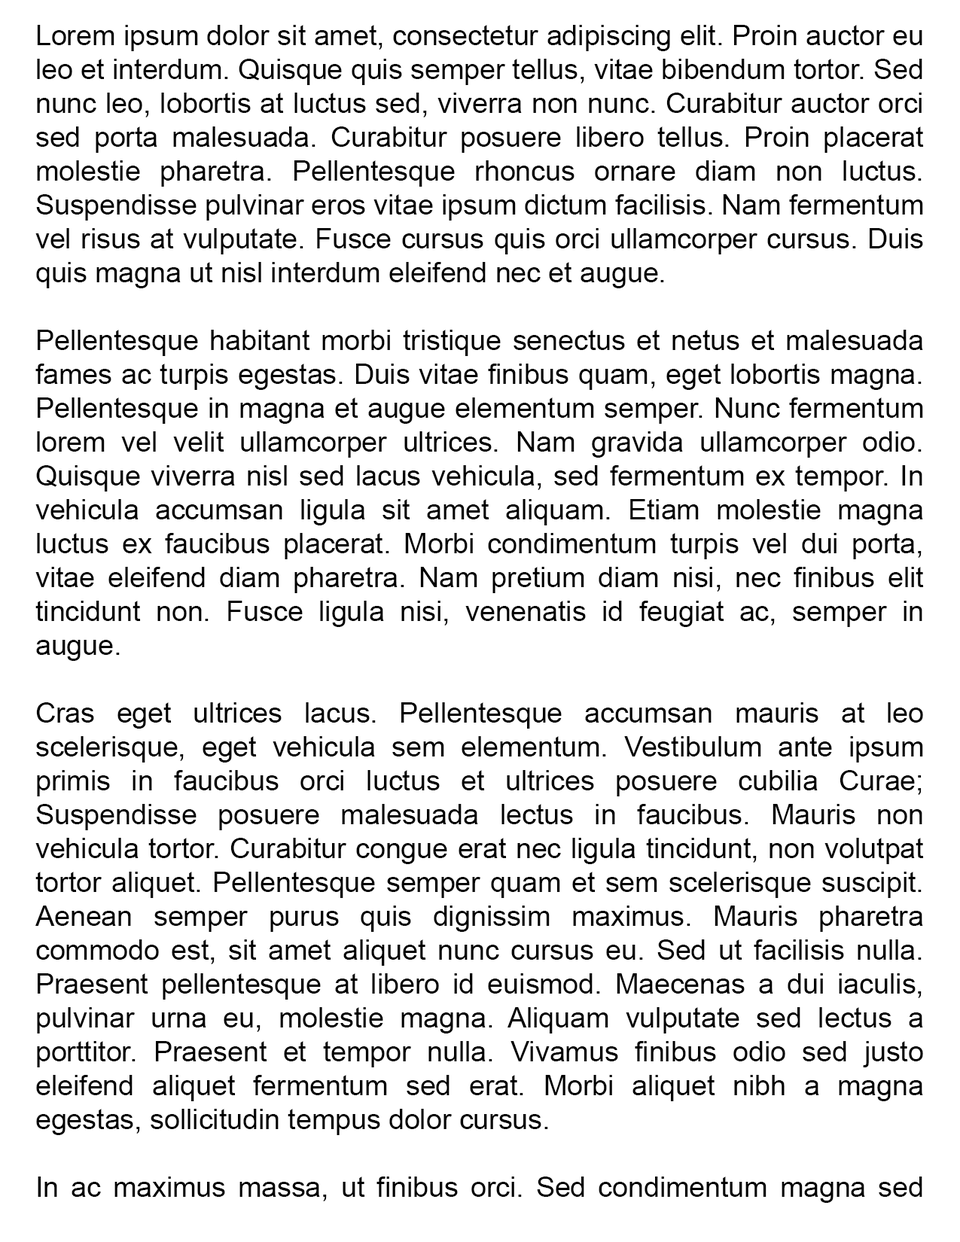
<style>
.page{position:relative;width:960px;height:1242px;background:#ffffff}
.page>*{position:absolute;margin:0}
.t1{font:28.2px "ArialMT";color:#000000}
</style>
<div class="page">
<p class="t1" style="left:35px;top:25px;width:889px;height:1178px;text-align:justify">Lorem ipsum dolor sit amet, consectetur adipiscing elit. Proin auctor eu leo et interdum. Quisque quis semper tellus, vitae bibendum tortor. Sed nunc leo, lobortis at luctus sed, viverra non nunc. Curabitur auctor orci sed porta malesuada. Curabitur posuere libero tellus. Proin placerat molestie pharetra. Pellentesque rhoncus ornare diam non luctus. Suspendisse pulvinar eros vitae ipsum dictum facilisis. Nam fermentum vel risus at vulputate. Fusce cursus quis orci ullamcorper cursus. Duis quis magna ut nisl interdum eleifend nec et augue.<br><br>Pellentesque habitant morbi tristique senectus et netus et malesuada fames ac turpis egestas. Duis vitae finibus quam, eget lobortis magna. Pellentesque in magna et augue elementum semper. Nunc fermentum lorem vel velit ullamcorper ultrices. Nam gravida ullamcorper odio. Quisque viverra nisl sed lacus vehicula, sed fermentum ex tempor. In vehicula accumsan ligula sit amet aliquam. Etiam molestie magna luctus ex faucibus placerat. Morbi condimentum turpis vel dui porta, vitae eleifend diam pharetra. Nam pretium diam nisi, nec finibus elit tincidunt non. Fusce ligula nisi, venenatis id feugiat ac, semper in augue.<br><br>Cras eget ultrices lacus. Pellentesque accumsan mauris at leo scelerisque, eget vehicula sem elementum. Vestibulum ante ipsum primis in faucibus orci luctus et ultrices posuere cubilia Curae; Suspendisse posuere malesuada lectus in faucibus. Mauris non vehicula tortor. Curabitur congue erat nec ligula tincidunt, non volutpat tortor aliquet. Pellentesque semper quam et sem scelerisque suscipit. Aenean semper purus quis dignissim maximus. Mauris pharetra commodo est, sit amet aliquet nunc cursus eu. Sed ut facilisis nulla. Praesent pellentesque at libero id euismod. Maecenas a dui iaculis, pulvinar urna eu, molestie magna. Aliquam vulputate sed lectus a porttitor. Praesent et tempor nulla. Vivamus finibus odio sed justo eleifend aliquet fermentum sed erat. Morbi aliquet nibh a magna egestas, sollicitudin tempus dolor cursus.<br><br>In ac maximus massa, ut finibus orci. Sed condimentum magna sed urna aliquam cursus. Nullam vulputate orci a tortor semper accumsan. Ut ac risus a erat pretium tempor. Sed ut arcu fringilla, auctor risus eget, imperdiet nunc. Sed porta rutrum molestie. Morbi facilisis tempor diam id sagittis. Nam sem nisi, tempus ac suscipit sed, ultricies et turpis. Integer vel tellus est. Quisque erat quam, sagittis et pellentesque nec, rhoncus eget est. Fusce maximus bibendum sodales.<br><br>Ut at diam mattis, eleifend ligula sit amet, interdum lectus. Vestibulum a magna sit amet sapien rhoncus pellentesque. Sed posuere tristique venenatis. Donec ornare tortor at urna faucibus semper. In hac habitasse platea dictumst. Nullam porta est eget leo sodales dignissim. Vestibulum vehicula pharetra pretium. Sed velit nunc, congue ac risus quis, varius lacinia neque. Ut ac ligula a orci blandit iaculis.</p>
</div>
